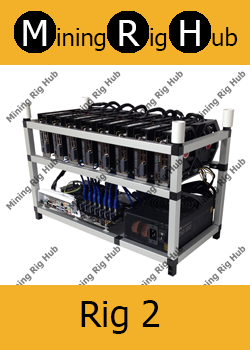
<style>
.page{position:relative;width:250px;height:350px;background:#f3b129}
.page>*{position:absolute;margin:0}
.t1{font:36px "Tahoma";color:#ffffff}
.t2{font:24px "Tahoma";color:#000000}
.t3{font:36px "Tahoma";color:#000000}
</style>
<div class="page">
<p class="t1" style="left:23px;top:20px;width:24px;height:26px">M</p>
<p class="t2" style="left:57px;top:28px;width:49px;height:23px">ining</p>
<p class="t1" style="left:119px;top:20px;width:21px;height:26px">R</p>
<p class="t2" style="left:150px;top:28px;width:17px;height:23px">ig</p>
<p class="t1" style="left:180px;top:20px;width:20px;height:26px">H</p>
<p class="t2" style="left:212px;top:27px;width:26px;height:19px">ub</p>
<p class="t3" style="left:81px;top:300px;width:79px;height:34px">Rig 2</p>
</div>
